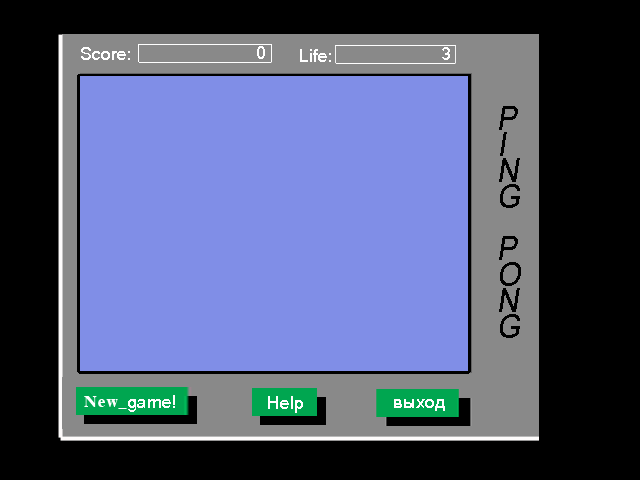
<style>
.page{position:relative;width:640px;height:480px;background:#000000}
.page>*{position:absolute;margin:0}
.t1{font:18px "HLife";color:#ffffff}
.t2{font:32.9px/26px "HLife";color:#000000;font-style:italic;scale:0.91 1}
</style>
<div class="page">
<p class="t1" style="left:81px;top:47px;width:49px;height:13px">Score:</p>
<p class="t1" style="left:257px;top:46px;width:8px;height:13px">0</p>
<p class="t1" style="left:300px;top:49px;width:31px;height:13px">Life:</p>
<p class="t1" style="left:442px;top:47px;width:8px;height:13px">3</p>
<p class="t2" style="left:499px;top:106px;width:22px;height:232px">P<br>I<br>N<br>G<br><br>P<br>O<br>N<br>G</p>
</div>
